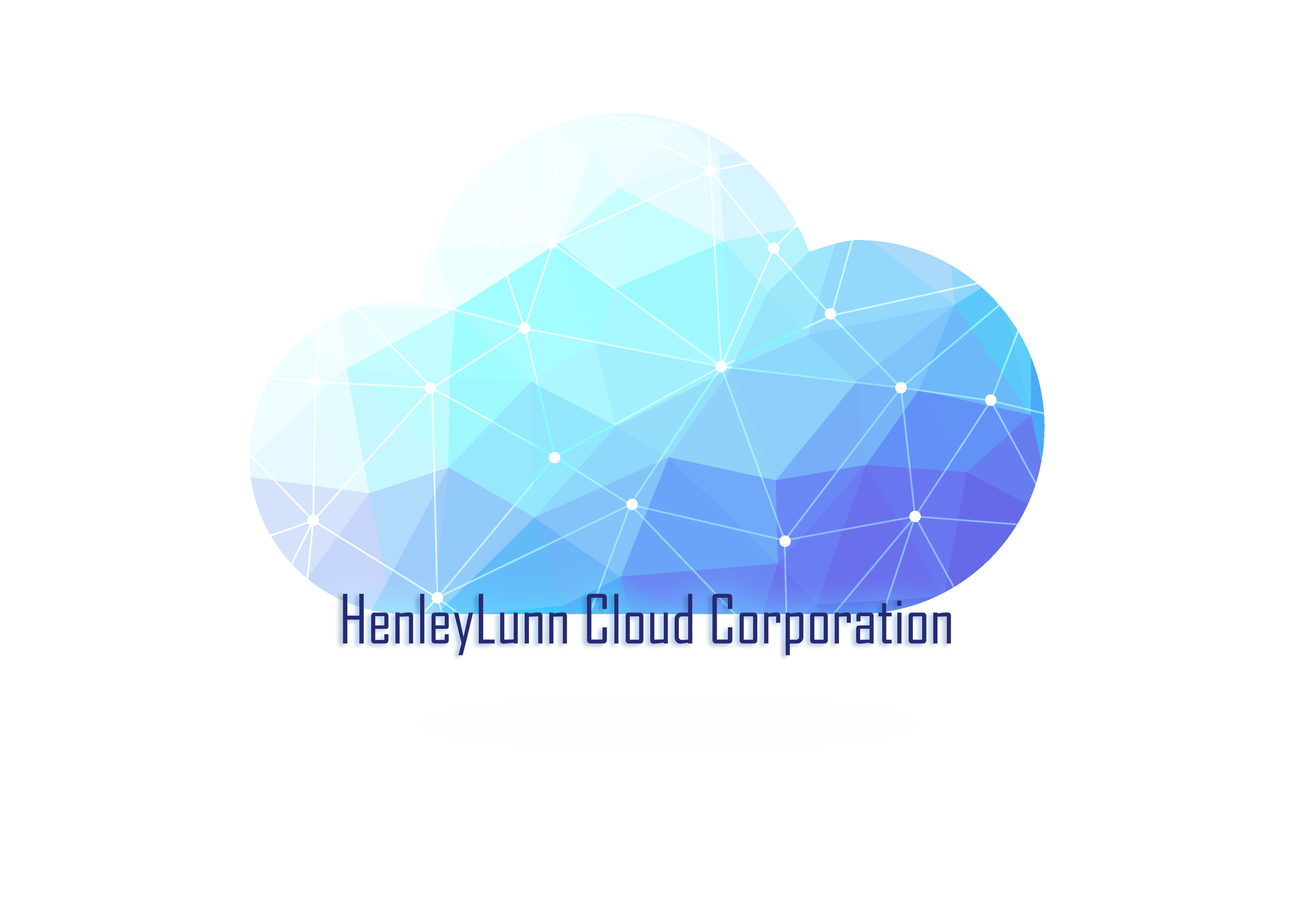
<style>
.page{position:relative;width:1294px;height:921px;background:#ffffff}
.page>*{position:absolute;margin:0}
.t1{font:65px "AgencyFB-Reg";color:#282974}
</style>
<div class="page">
<p class="t1" style="left:343px;top:594px;width:609px;height:61px">HenleyLunn Cloud Corporation</p>
</div>
